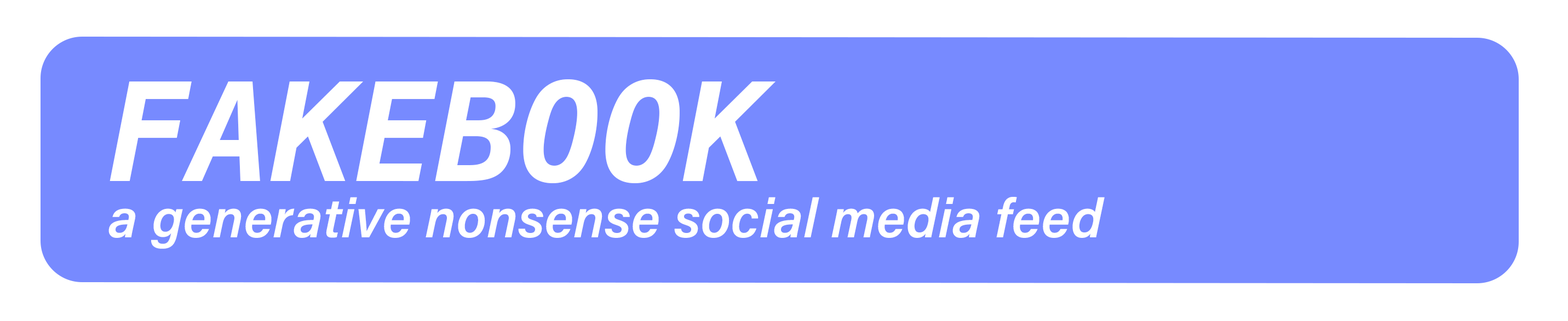
<style>
.page{position:relative;width:1568px;height:321px;background:#778aff}
.page>*{position:absolute;margin:0}
.t1{font:136.9px "Menlo-BoldItalic";color:#ffffff}
.t2{font:54.8px "AcuminConcept-SemiboldItalic";color:#ffffff}
</style>
<div class="page">
<p class="t1" style="left:110px;top:79px;width:666px;height:104px">FAKEBOOK</p>
<p class="t2" style="left:108px;top:197px;width:997px;height:52px">a generative nonsense social media feed</p>
</div>
